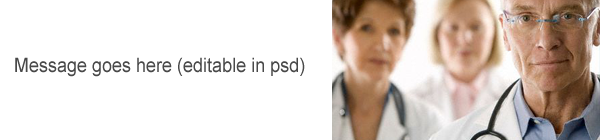
<style>
.page{position:relative;width:600px;height:140px;background:#ffffff}
.page>*{position:absolute;margin:0}
.t1{font:19.8px "ArialMT";color:#494949;scale:0.91 1}
</style>
<div class="page">
<p class="t1" style="left:15px;top:57px;width:290px;height:20px">Message goes here (editable in psd)</p>
</div>
